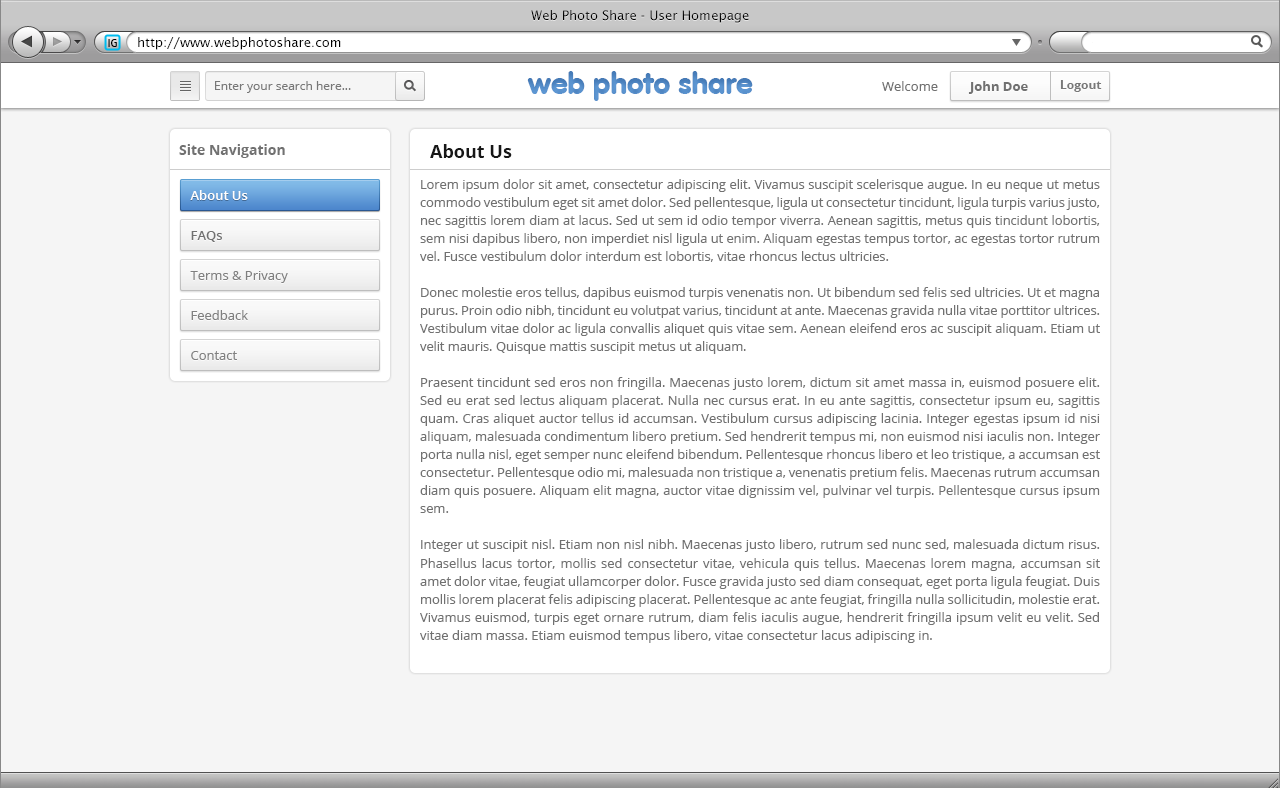
<style>
.page{position:relative;width:1280px;height:788px;background:#ffffff}
.page>*{position:absolute;margin:0}
.t1{font:13px "LucidaSans";color:#000000}
.t2{font:12px "Dax-Regular";color:#000000}
.t3{font:30px "VAGRounded-Black";color:#619bd7}
.t4{font:12px "OpenSans";color:#787878}
.t5{font:13px "OpenSans";color:#717171}
.t6{font:13px "OpenSans-Bold";color:#717171}
.t7{font:12px "OpenSans-Bold";color:#787878}
.t8{font:14px "OpenSans-Bold";color:#717171}
.t9{font:18px "OpenSans-Bold";color:#171717}
.t10{font:13px/18px "OpenSans";color:#717171}
.t11{font:13px "OpenSans-Semibold";color:#ffffff}
.t12{font:13px "OpenSans-Semibold";color:#717171}
.t13{font:13px "OpenSans";color:#808080}
</style>
<div class="page">
<p class="t1" style="left:531px;top:10px;width:218px;height:13px">Web Photo Share - User Homepage</p>
<p class="t2" style="left:108px;top:39px;width:9px;height:8px">IG</p>
<p class="t1" style="left:138px;top:37px;width:203px;height:13px">http://www.webphotoshare.com</p>
<p class="t3" style="left:527px;top:71px;width:226px;height:30px">web photo share</p>
<p class="t4" style="left:215px;top:81px;width:136px;height:12px">Enter your search here...</p>
<p class="t5" style="left:882px;top:81px;width:56px;height:10px">Welcome</p>
<p class="t6" style="left:968px;top:81px;width:60px;height:13px">John Doe</p>
<p class="t7" style="left:1060px;top:80px;width:42px;height:12px">Logout</p>
<p class="t8" style="left:179px;top:144px;width:106px;height:14px">Site Navigation</p>
<p class="t9" style="left:430px;top:144px;width:82px;height:14px">About Us</p>
<p class="t10" style="left:420px;top:179px;width:680px;height:464px;text-align:justify">Lorem ipsum dolor sit amet, consectetur adipiscing elit. Vivamus suscipit scelerisque augue. In eu neque ut metus commodo vestibulum eget sit amet dolor. Sed pellentesque, ligula ut consectetur tincidunt, ligula turpis varius justo, nec sagittis lorem diam at lacus. Sed ut sem id odio tempor viverra. Aenean sagittis, metus quis tincidunt lobortis, sem nisi dapibus libero, non imperdiet nisl ligula ut enim. Aliquam egestas tempus tortor, ac egestas tortor rutrum vel. Fusce vestibulum dolor interdum est lobortis, vitae rhoncus lectus ultricies.<br><br>Donec molestie eros tellus, dapibus euismod turpis venenatis non. Ut bibendum sed felis sed ultricies. Ut et magna purus. Proin odio nibh, tincidunt eu volutpat varius, tincidunt at ante. Maecenas gravida nulla vitae porttitor ultrices. Vestibulum vitae dolor ac ligula convallis aliquet quis vitae sem. Aenean eleifend eros ac suscipit aliquam. Etiam ut velit mauris. Quisque mattis suscipit metus ut aliquam.<br><br>Praesent tincidunt sed eros non fringilla. Maecenas justo lorem, dictum sit amet massa in, euismod posuere elit. Sed eu erat sed lectus aliquam placerat. Nulla nec cursus erat. In eu ante sagittis, consectetur ipsum eu, sagittis quam. Cras aliquet auctor tellus id accumsan. Vestibulum cursus adipiscing lacinia. Integer egestas ipsum id nisi aliquam, malesuada condimentum libero pretium. Sed hendrerit tempus mi, non euismod nisi iaculis non. Integer porta nulla nisl, eget semper nunc eleifend bibendum. Pellentesque rhoncus libero et leo tristique, a accumsan est consectetur. Pellentesque odio mi, malesuada non tristique a, venenatis pretium felis. Maecenas rutrum accumsan diam quis posuere. Aliquam elit magna, auctor vitae dignissim vel, pulvinar vel turpis. Pellentesque cursus ipsum sem.<br><br>Integer ut suscipit nisl. Etiam non nisl nibh. Maecenas justo libero, rutrum sed nunc sed, malesuada dictum risus. Phasellus lacus tortor, mollis sed consectetur vitae, vehicula quis tellus. Maecenas lorem magna, accumsan sit amet dolor vitae, feugiat ullamcorper dolor. Fusce gravida justo sed diam consequat, eget porta ligula feugiat. Duis mollis lorem placerat felis adipiscing placerat. Pellentesque ac ante feugiat, fringilla nulla sollicitudin, molestie erat. Vivamus euismod, turpis eget ornare rutrum, diam felis iaculis augue, hendrerit fringilla ipsum velit eu velit. Sed vitae diam massa. Etiam euismod tempus libero, vitae consectetur lacus adipiscing in.</p>
<p class="t11" style="left:190px;top:190px;width:58px;height:10px">About Us</p>
<p class="t11" style="left:190px;top:190px;width:58px;height:10px">About Us</p>
<p class="t12" style="left:191px;top:231px;width:31px;height:11px">FAQs</p>
<p class="t13" style="left:190px;top:271px;width:98px;height:12px">Terms &amp; Privacy</p>
<p class="t13" style="left:191px;top:310px;width:57px;height:10px">Feedback</p>
<p class="t13" style="left:191px;top:351px;width:46px;height:9px">Contact</p>
</div>
